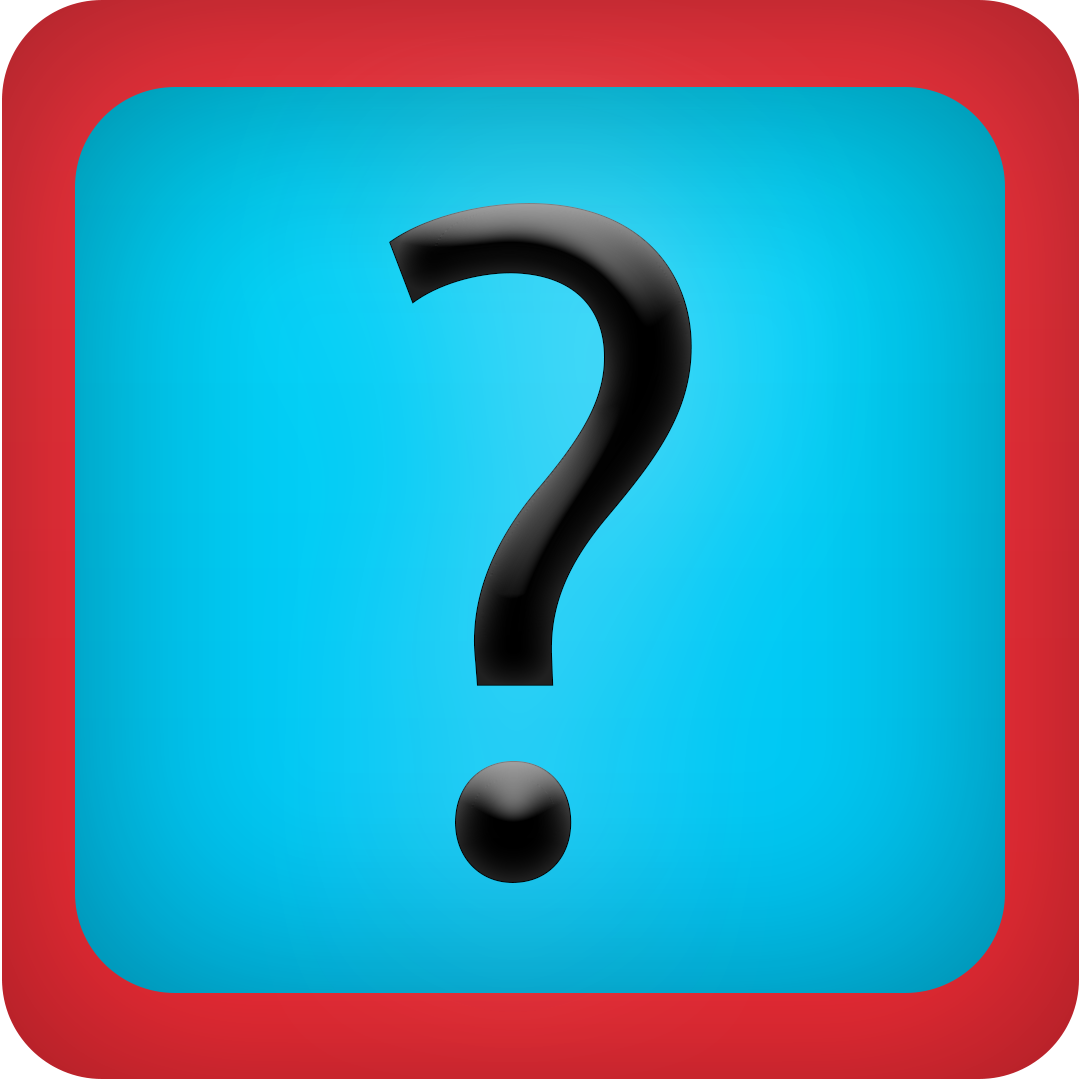
<style>
.page{position:relative;width:1079px;height:1079px}
.page>*{position:absolute;margin:0}
.t1{font:976.4px "MyriadPro-Regular"}
</style>
<div class="page">
<p class="t1" style="left:389px;top:203px;width:303px;height:680px">?</p>
</div>
